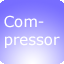
<style>
.page{position:relative;width:64px;height:64px}
.page>*{position:absolute;margin:0}
.t1{font:14.9px "Verdana";color:#ffffff}
</style>
<div class="page">
<p class="t1" style="left:4px;top:15px;width:56px;height:33px">Com-<br>pressor</p>
</div>
